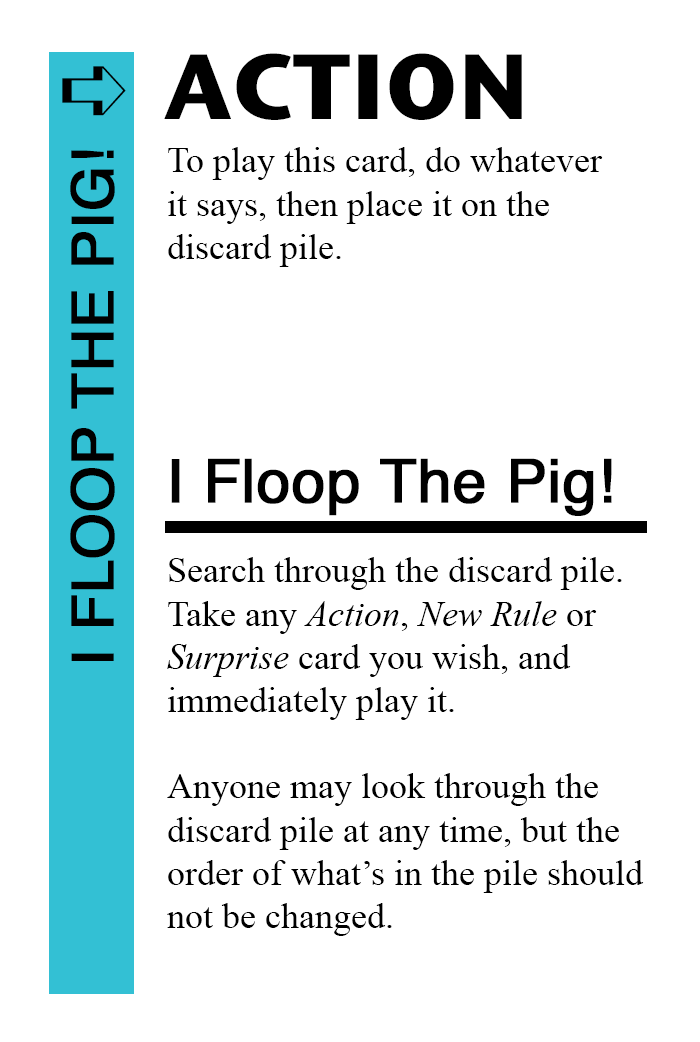
<style>
.page{position:relative;width:700px;height:1042px;background:#ffffff}
.page>*{position:absolute;margin:0}
.t1{font:92px "StoneSansITC-Bold";color:#000000}
.t2{font:82px "MS-Gothic";color:#000000}
.t3{font:58px "Helvetica";color:#000000;font-weight:bold}
.t4{font:36px "TimesNewRomanPSMT";color:#000000}
.t5{font:60px "Helvetica";color:#000000;font-weight:bold}
.t6{font:36px "TimesNewRomanPS-ItalicMT";color:#000000}
</style>
<div class="page">
<p class="t1" style="left:164px;top:53px;width:358px;height:67px">ACTION</p>
<p class="t2" style="left:62px;top:66px;width:64px;height:50px">➪</p>
<p class="t3" style="left:70px;top:150px;width:45px;height:511px;rotate:-90deg">I FLOOP THE PIG!</p>
<p class="t4" style="left:168px;top:147px;width:435px;height:120px">To play this card, do whatever<br>it says, then place it on the<br>discard pile.</p>
<p class="t5" style="left:171px;top:458px;width:441px;height:58px">I Floop The Pig!</p>
<p class="t4" style="left:167px;top:557px;width:477px;height:379px">Search through the discard pile.<br>Take any <span class="t6">Action</span>, <span class="t6">New Rule</span> or<br><span class="t6">Surprise</span> card you wish, and <br>immediately play it.<br><br>Anyone may look through the <br>discard pile at any time, but the<br>order of what’s in the pile should<br>not be changed.</p>
</div>
